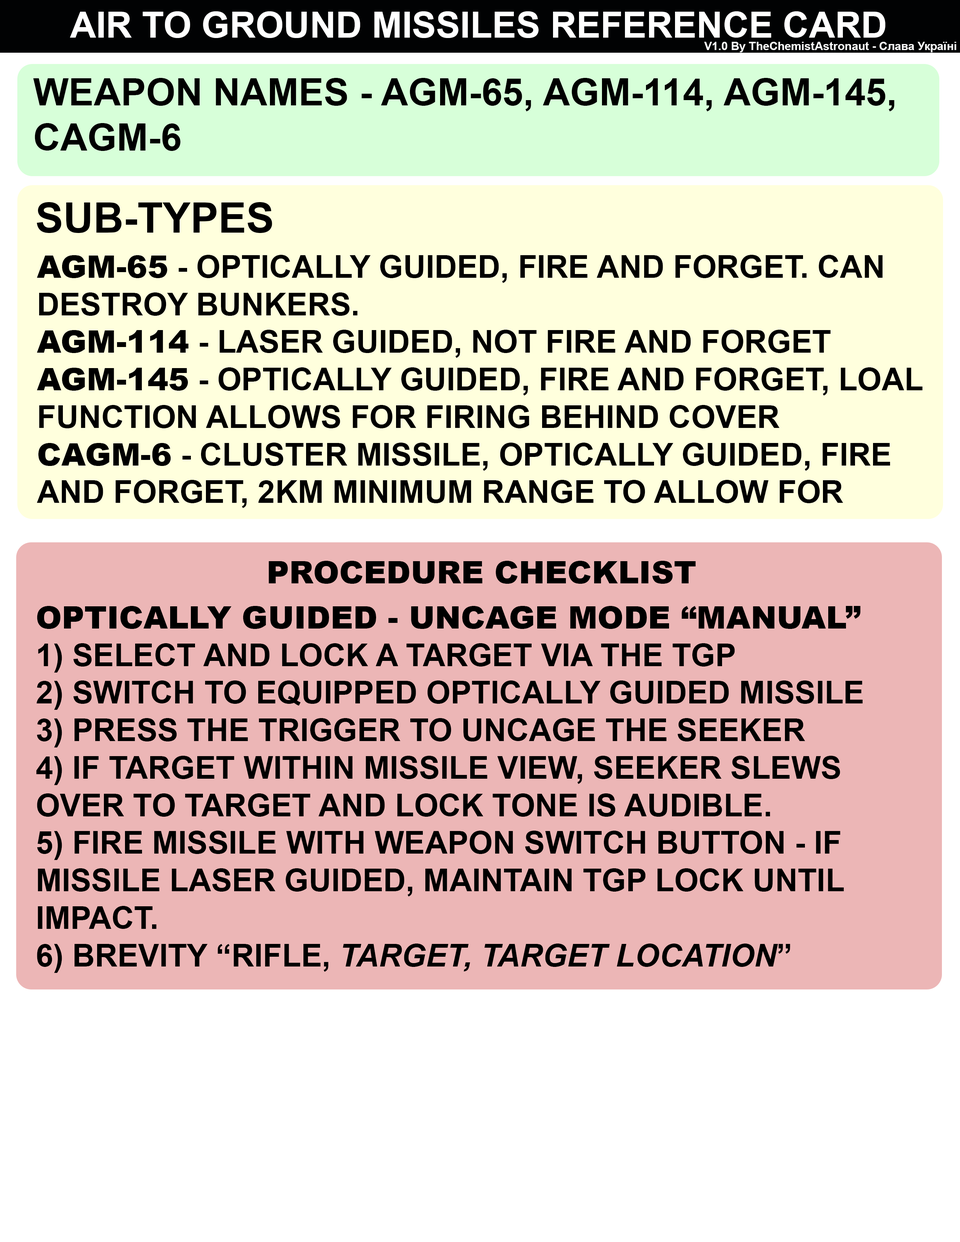
<style>
.page{position:relative;width:960px;height:1242px;background:#ffffff}
.page>*{position:absolute;margin:0}
.t1{font:36.1px "Arial-BoldMT";color:#ffffff}
.t2{font:11.5px "Arial-BoldMT";color:#ffffff}
.t3{font:37.6px "Arial-BoldMT";color:#000000}
.t4{font:41.7px "Arial-BoldMT";color:#000000}
.t5{font:31.3px "Arial-BoldMT";color:#000000}
.t6{font:31.3px "Arial-Black";color:#000000}
.t7{font:31.4px "Arial-Black";color:#000000}
.t8{font:31.3px "Arial-BoldItalicMT";color:#000000}
</style>
<div class="page">
<p class="t1" style="left:70px;top:11px;width:815px;height:27px">AIR TO GROUND MISSILES REFERENCE CARD</p>
<p class="t2" style="left:704px;top:42px;width:252px;height:10px">V1.0 By TheChemistAstronaut - Слава Україні</p>
<p class="t3" style="left:33px;top:78px;width:861px;height:73px">WEAPON NAMES - AGM-65, AGM-114, AGM-145, CAGM-6</p>
<p class="t4" style="left:37px;top:202px;width:235px;height:31px">SUB-TYPES</p>
<p class="t5" style="left:37px;top:255px;width:886px;height:253px"><span class="t6">AGM-65</span> - OPTICALLY GUIDED, FIRE AND FORGET. CAN DESTROY BUNKERS.<br><span class="t6">AGM-114</span> - LASER GUIDED, NOT FIRE AND FORGET<br><span class="t6">AGM-145</span> - OPTICALLY GUIDED, FIRE AND FORGET, LOAL FUNCTION ALLOWS FOR FIRING BEHIND COVER<br><span class="t6">CAGM-6</span> - CLUSTER MISSILE, OPTICALLY GUIDED, FIRE AND FORGET, 2KM MINIMUM RANGE TO ALLOW FOR SUBMUNITION SPREAD WITHIN 1KM CONE.</p>
<p class="t7" style="left:269px;top:561px;width:427px;height:23px">PROCEDURE CHECKLIST</p>
<p class="t5" style="left:36px;top:606px;width:827px;height:367px"><span class="t6">OPTICALLY GUIDED - UNCAGE MODE “MANUAL”<br></span>1) SELECT AND LOCK A TARGET VIA THE TGP<br>2) SWITCH TO EQUIPPED OPTICALLY GUIDED MISSILE<br>3) PRESS THE TRIGGER TO UNCAGE THE SEEKER<br>4) IF TARGET WITHIN MISSILE VIEW, SEEKER SLEWS OVER TO TARGET AND LOCK TONE IS AUDIBLE.<br>5) FIRE MISSILE WITH WEAPON SWITCH BUTTON - IF MISSILE LASER GUIDED, MAINTAIN TGP LOCK UNTIL IMPACT.<br>6) BREVITY “RIFLE, <span class="t8">TARGET, TARGET LOCATION</span>”</p>
</div>
